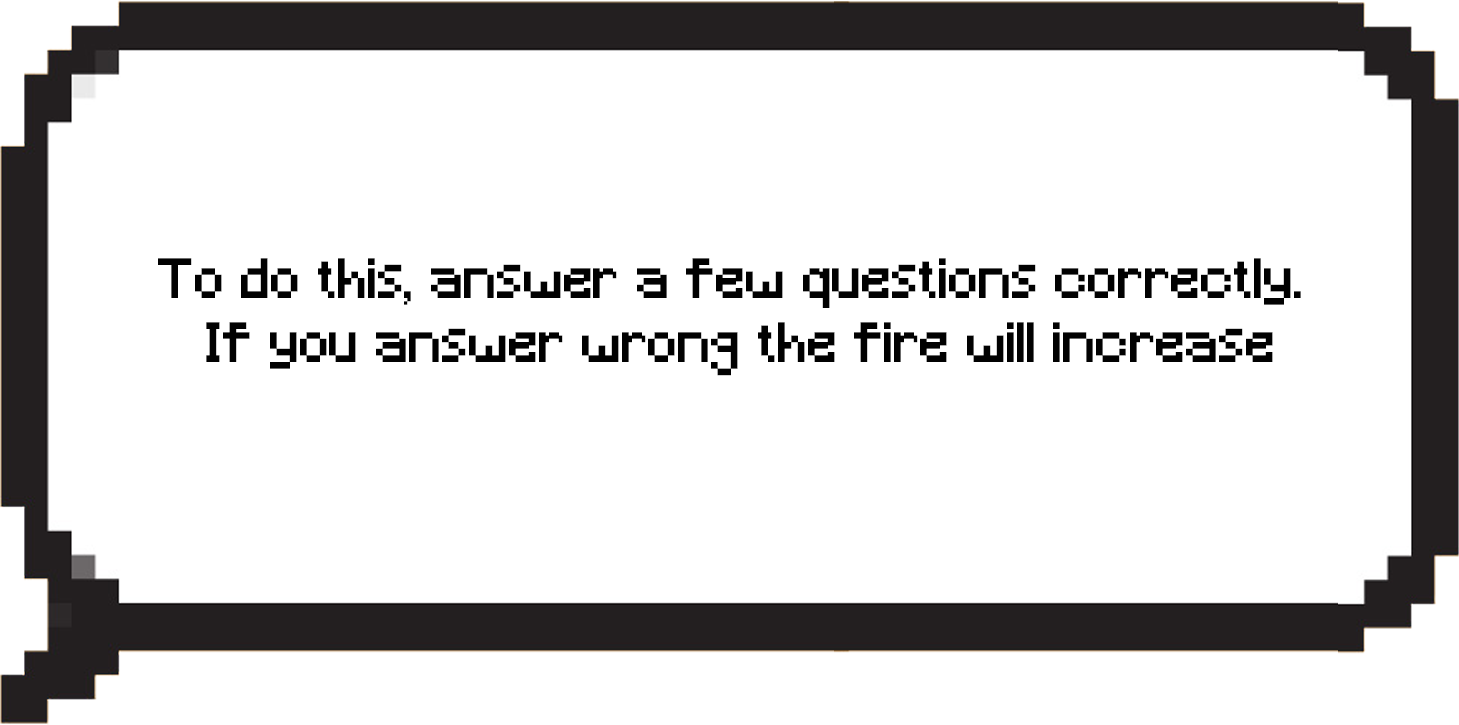
<style>
.page{position:relative;width:1459px;height:725px;background:#ffffff}
.page>*{position:absolute;margin:0}
.t1{font:53.1px "Minecraft";color:#010101}
</style>
<div class="page">
<p class="t1" style="left:158px;top:258px;width:1143px;height:118px;text-align:center">To do this, answer a few questions correctly. <br>If you answer wrong the fire will increase</p>
</div>
